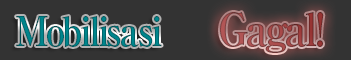
<style>
.page{position:relative;width:351px;height:60px;background:#333333}
.page>*{position:absolute;margin:0}
.t1{font:40px "RyuminPro-ExBold";letter-spacing:-0.08em;color:#00757b;scale:0.9 1}
.t2{font:45px "RyuminPro-ExBold";letter-spacing:-0.08em;scale:0.9 1}
</style>
<div class="page">
<p class="t1" style="left:16px;top:16px;width:146px;height:31px">Mobilisasi</p>
<p class="t2" style="left:220px;top:12px;width:104px;height:41px">Gagal!</p>
</div>
